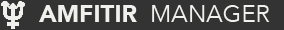
<style>
.page{position:relative;width:284px;height:30px;background:#333333}
.page>*{position:absolute;margin:0}
.t1{font:24px "Avenir-Black";color:#f0f0ed}
.t2{font:24px "AvenirNext-Regular";color:#f0f0ed}
</style>
<div class="page">
<p class="t1" style="left:39px;top:5px;width:98px;height:17px">AMFITIR</p>
<p class="t2" style="left:152px;top:5px;width:118px;height:17px">MANAGER</p>
</div>
